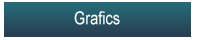
<style>
.page{position:relative;width:210px;height:40px;background:#ffffff}
.page>*{position:absolute;margin:0}
.t1{font:17.8px "ArialMT";color:#fcfcfc;scale:0.82 1}
</style>
<div class="page">
<p class="t1" style="left:74px;top:11px;width:46px;height:14px">Grafics</p>
</div>
